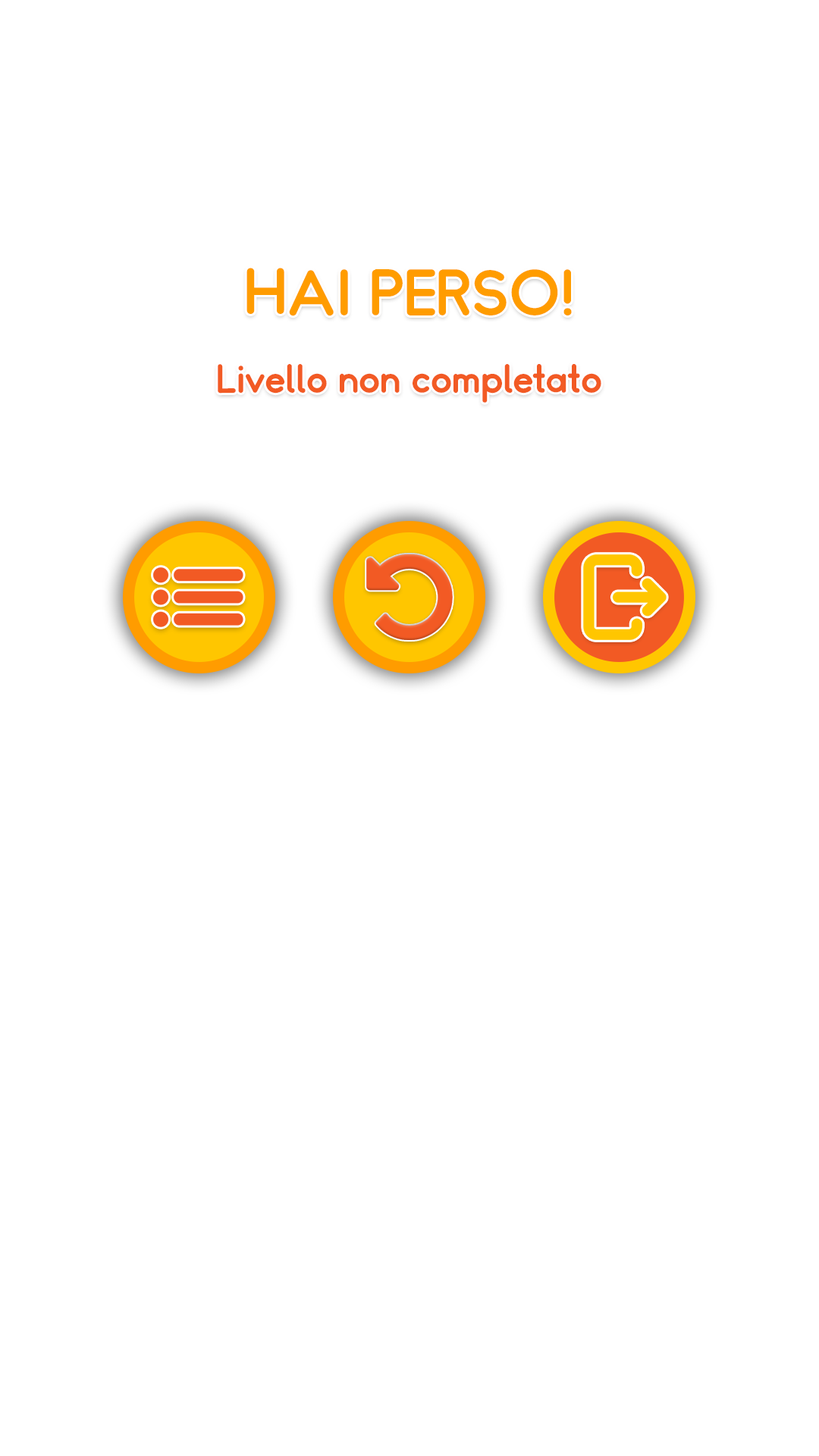
<style>
.page{position:relative;width:819px;height:1456px;background:#ffffff}
.page>*{position:absolute;margin:0}
.t1{font:60.7px "Somatic-Rounded";color:#ff9c00}
.t2{font:37.9px "Somatic-Rounded";color:#f25a24}
</style>
<div class="page">
<p class="t1" style="left:246px;top:268px;width:326px;height:48px">HAI PERSO!</p>
<p class="t2" style="left:218px;top:364px;width:383px;height:39px">Livello non completato</p>
</div>
